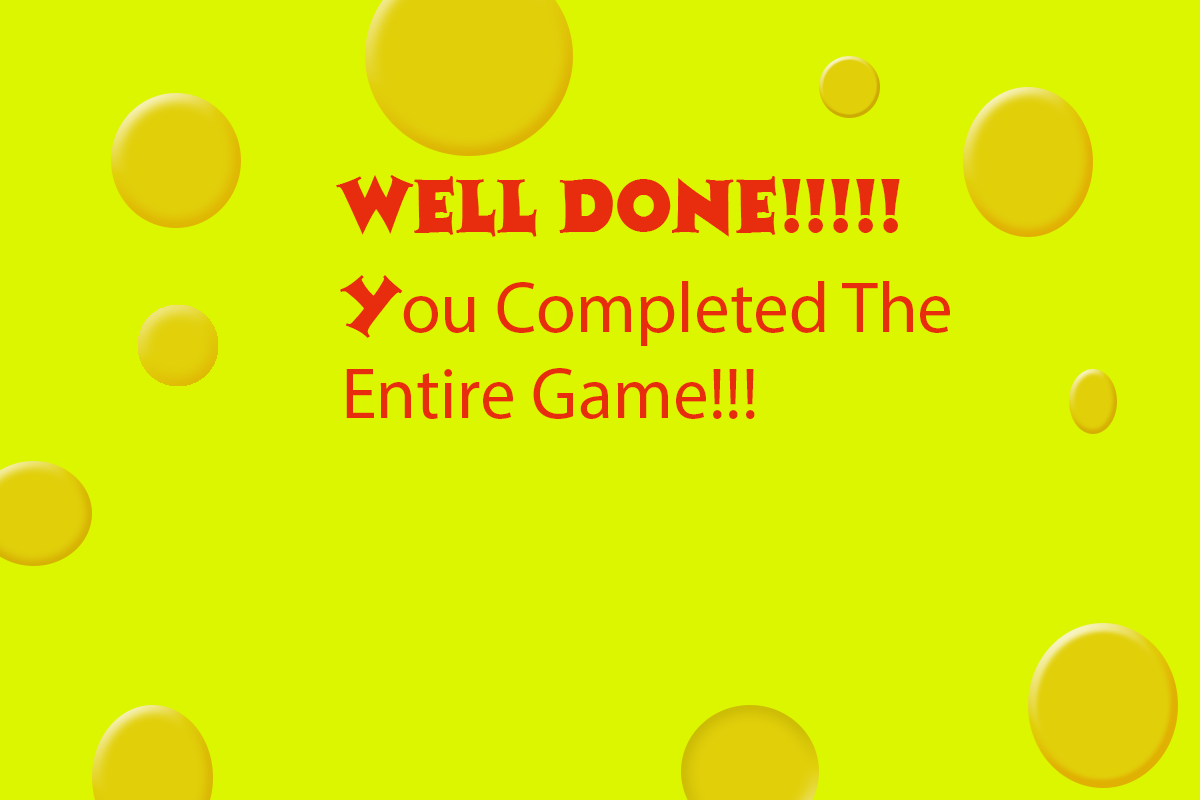
<style>
.page{position:relative;width:1200px;height:800px;background:#dcf600}
.page>*{position:absolute;margin:0}
.t1{font:72px "Colbert";color:#e82c0e}
.t2{font:72px "MyriadPro-Regular";color:#e82c0e}
</style>
<div class="page">
<p class="t1" style="left:336px;top:175px;width:564px;height:62px">WELL DONE!!!!!</p>
<p class="t2" style="left:340px;top:275px;width:610px;height:144px"><span class="t1">Y</span>ou Completed The Entire Game!!!</p>
</div>
